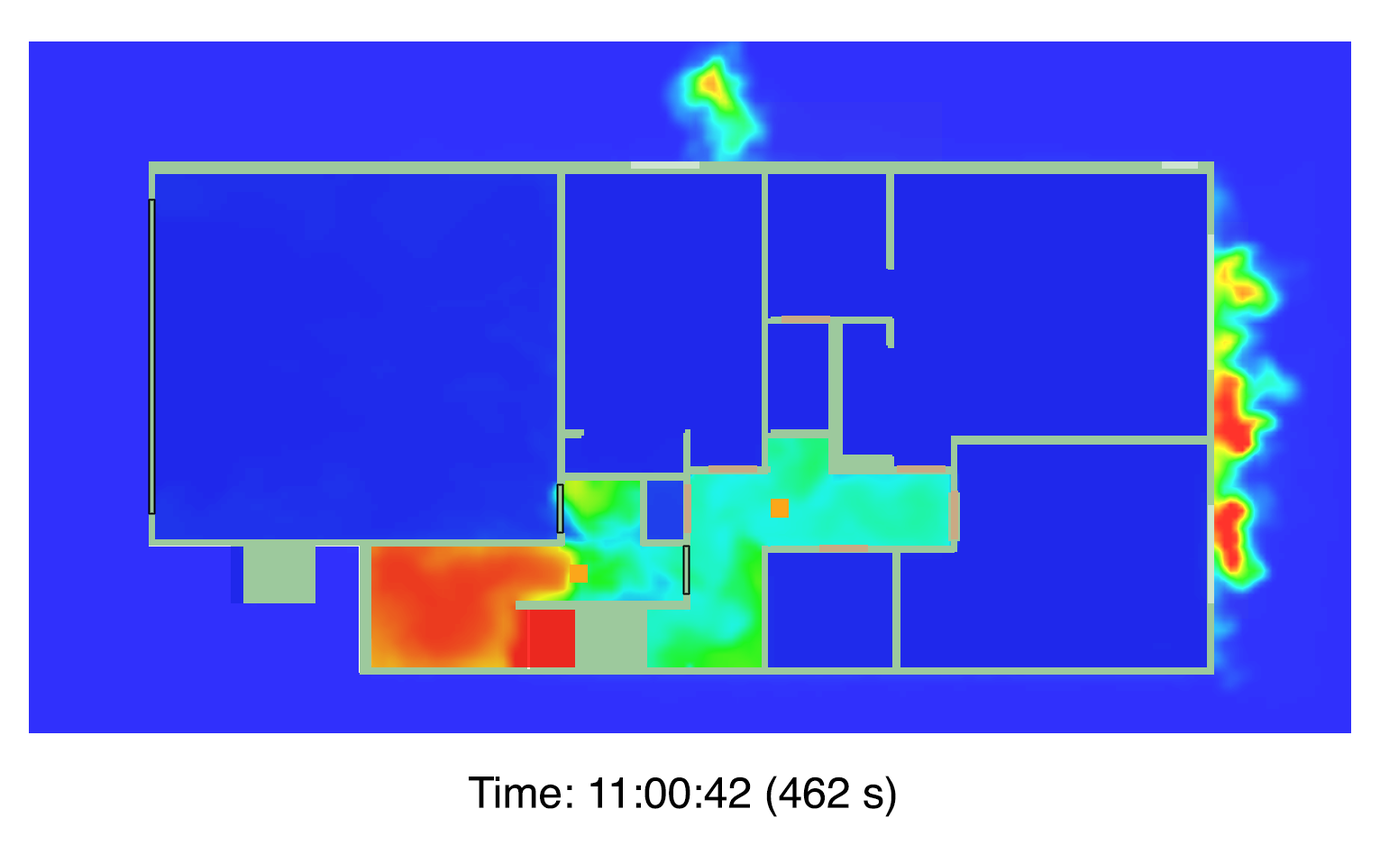
<style>
.page{position:relative;width:1380px;height:864px;background:#3030fc}
.page>*{position:absolute;margin:0}
.t1{font:43.3px "Helvetica";color:#000000}
</style>
<div class="page">
<p class="t1" style="left:469px;top:775px;width:427px;height:42px">Time: 11:00:42 (462 s)</p>
</div>
